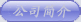
<style>
.page{position:relative;width:81px;height:22px}
.page>*{position:absolute;margin:0}
.t1{font:14px "KaiTi_GB2312";color:#c4c5d7;font-weight:bold;font-style:italic}
</style>
<div class="page">
<p class="t1" style="left:13px;top:4px;width:58px;height:14px">公司简介</p>
</div>
